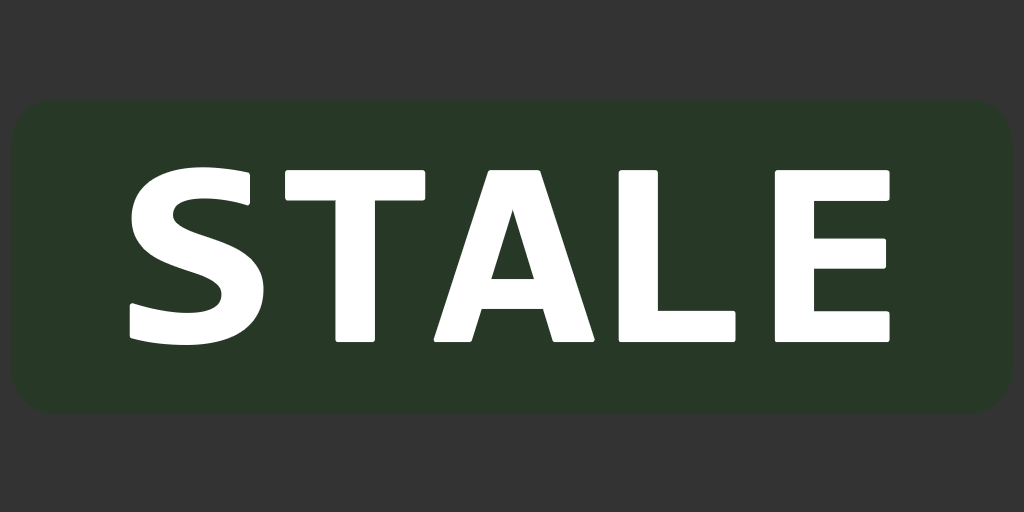
<style>
.page{position:relative;width:1024px;height:512px;background:#273827}
.page>*{position:absolute;margin:0}
.t1{font:262.6px "Consolas-Bold";color:#ffffff;scale:1.1 1}
</style>
<div class="page">
<p class="t1" style="left:131px;top:169px;width:757px;height:174px">STALE</p>
</div>
